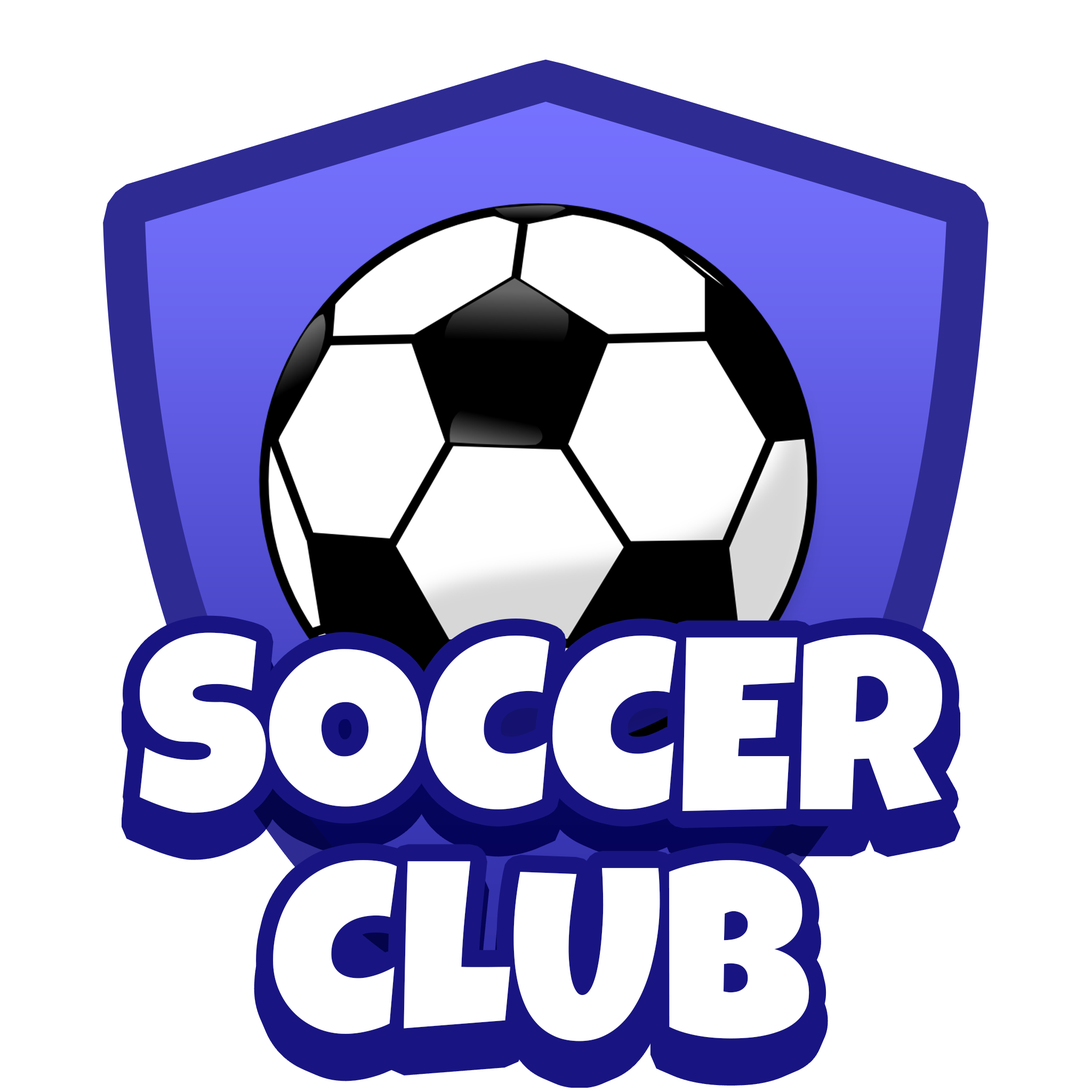
<style>
.page{position:relative;width:1092px;height:1092px;background:#ffffff}
.page>*{position:absolute;margin:0}
.t1{font:246.1px "LuckiestGuy-Regular";color:#ffffff}
.t2{font:246.1px/224.4px "LuckiestGuy-Regular";color:#ffffff}
</style>
<div class="page">
<p class="t1" style="left:140px;top:632px;width:802px;height:409px;text-align:center">SOCCER<br><span class="t2">CLUB</span></p>
</div>
